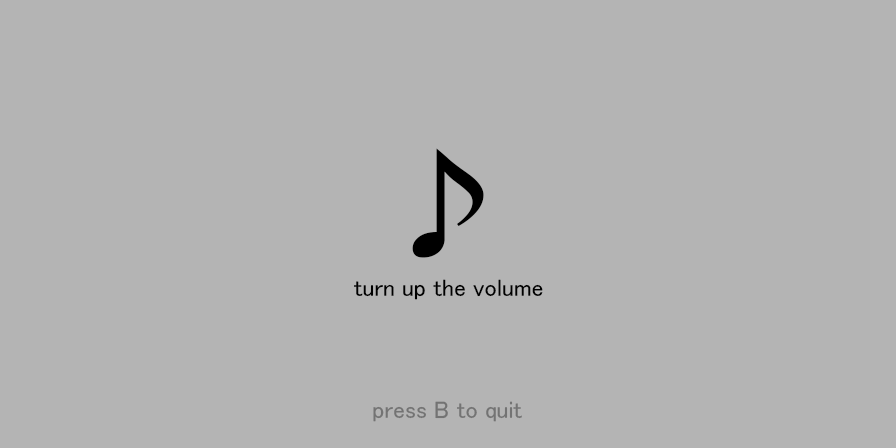
<style>
.page{position:relative;width:896px;height:448px;background:#b4b4b4}
.page>*{position:absolute;margin:0}
.t1{font:128px "MS-UIGothic";color:#000000}
.t2{font:24px "MS-UIGothic";color:#000000}
.t3{font:24px "MS-UIGothic";color:#737373}
</style>
<div class="page">
<p class="t1" style="left:412px;top:148px;width:72px;height:110px">♪</p>
<p class="t2" style="left:354px;top:279px;width:189px;height:21px">turn up the volume</p>
<p class="t3" style="left:373px;top:401px;width:149px;height:21px">press B to quit</p>
</div>
